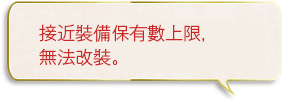
<style>
.page{position:relative;width:285px;height:100px;background:#f5eee7}
.page>*{position:absolute;margin:0}
.t1{font:18px/24px "GothicMB101Pr6N-Light";color:#cb2726}
</style>
<div class="page">
<p class="t1" style="left:39px;top:24px;width:166px;height:42px">接近裝備保有數上限，<br>無法改裝。</p>
</div>
